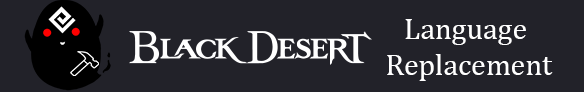
<style>
.page{position:relative;width:584px;height:92px;background:#222229}
.page>*{position:absolute;margin:0}
.t1{font:30px "CambriaMath";color:#ffffff}
</style>
<div class="page">
<p class="t1" style="left:387px;top:19px;width:166px;height:62px;text-align:center">Language <br>Replacement</p>
</div>
